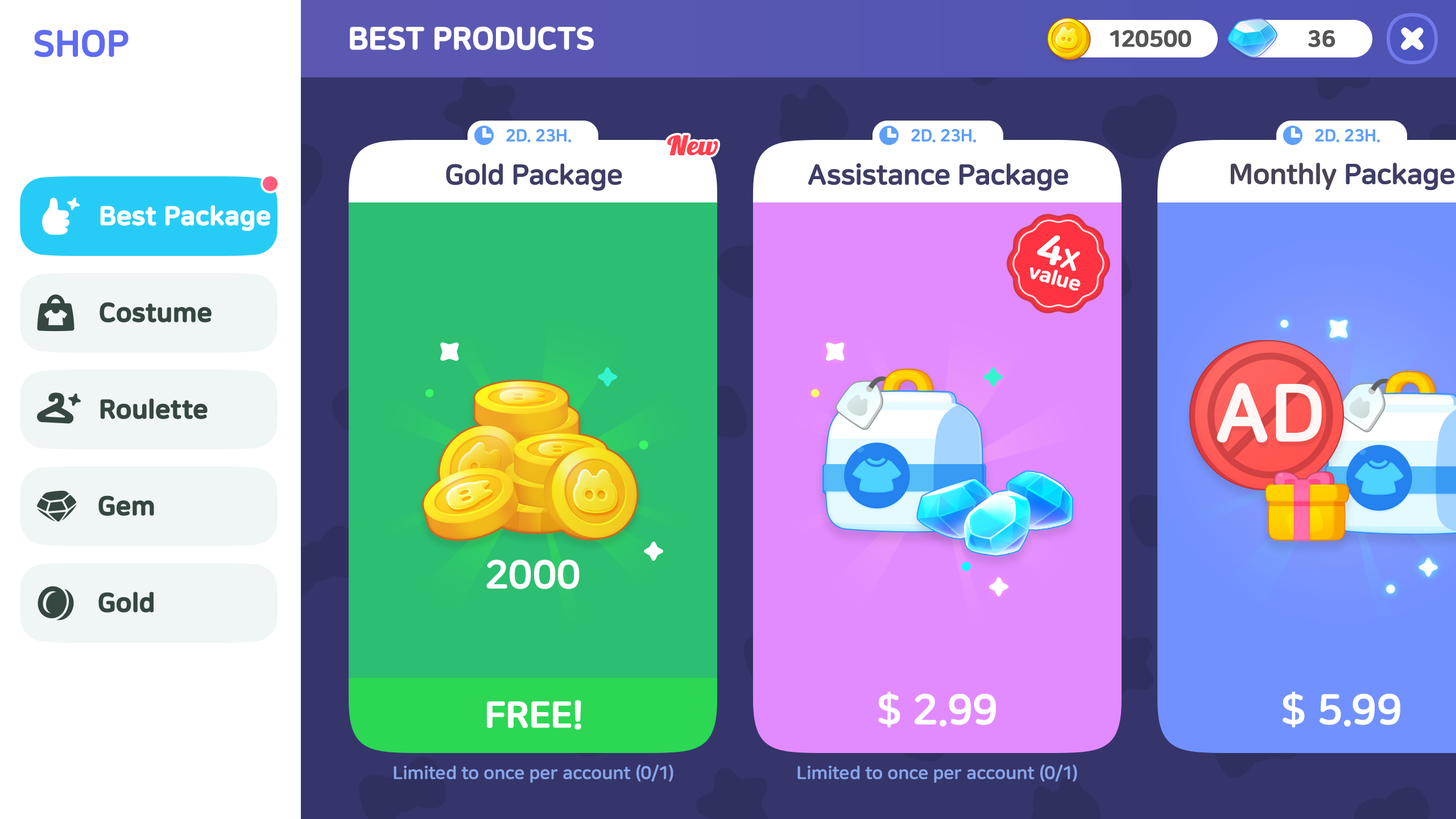
<style>
.page{position:relative;width:1456px;height:819px}
.page>*{position:absolute;margin:0}
.t1{font:36.4px "NanumSquareRoundOTFEB";letter-spacing:-0.01em;color:#5f6bf3;font-weight:bold}
.t2{font:30.7px "NanumSquareRoundOTFEB";letter-spacing:-0.01em;color:#ffffff;text-transform:uppercase;font-weight:bold}
.t3{font:22.7px "NanumSquareRoundOTFEB";letter-spacing:-0.01em;color:#555555;font-weight:bold}
.t4{font:17.1px "NanumSquareRoundOTFEB";letter-spacing:-0.01em;color:#5e9ff9}
.t5{font:25.6px "Lobster1.3";letter-spacing:-0.01em;color:#ff404e;font-weight:bold;scale:1.11 1}
.t6{font:28.4px "NanumSquareRoundEB";letter-spacing:-0.01em;color:#3d3d66}
.t7{font:28.4px "NanumSquareRoundOTFEB";letter-spacing:-0.01em;color:#3d3d66}
.t8{font:28.4px "NanumSquareRoundOTFEB";letter-spacing:-0.01em;color:#4a4354}
.t9{font:26.2px "NanumSquareRoundOTFEB";letter-spacing:-0.01em;color:#ffffff;font-weight:bold}
.t10{font:40.9px "NanumSquareRoundOTFEB";letter-spacing:-0.01em;color:#ffffff;text-transform:uppercase;font-weight:bold}
.t11{font:27.3px "NanumSquareRoundOTFEB";letter-spacing:-0.01em;color:#ffffff;text-transform:uppercase;font-weight:bold}
.t12{font:20.5px "NanumSquareRoundOTFEB";letter-spacing:-0.01em;color:#fdf8f9;font-weight:bold}
.t13{font:26.2px "NanumSquareRoundOTFEB";letter-spacing:-0.01em;color:#364741;font-weight:bold}
.t14{font:81.1px "NanumSquareRoundOTFEB";letter-spacing:-0.01em;color:#fff7f5;text-transform:uppercase;font-weight:bold}
.t15{font:39.8px "NanumSquareRoundEB";color:#ffffff}
.t16{font:36.4px "NanumSquareRoundOTFEB";letter-spacing:-0.01em;color:#ffffff;text-transform:uppercase;font-weight:bold}
.t17{font:42.6px "NanumSquareRoundOTFEB";letter-spacing:-0.01em;color:#ffffff;text-transform:uppercase}
.t18{font:18.2px "NanumSquareRoundOTFEB";letter-spacing:-0.01em;color:#87a4e8}
</style>
<div class="page">
<p class="t1" style="left:34px;top:30px;width:95px;height:27px">SHOP</p>
<p class="t2" style="left:350px;top:26px;width:244px;height:24px">Best Products</p>
<p class="t3" style="left:1110px;top:30px;width:82px;height:17px">120500</p>
<p class="t3" style="left:1308px;top:30px;width:27px;height:17px">36</p>
<p class="t4" style="left:506px;top:129px;width:65px;height:14px">2D. 23H.</p>
<p class="t5" style="left:667px;top:135px;width:51px;height:20px">New</p>
<p class="t4" style="left:911px;top:129px;width:65px;height:14px">2D. 23H.</p>
<p class="t4" style="left:1315px;top:129px;width:65px;height:14px">2D. 23H.</p>
<p class="t6" style="left:446px;top:163px;width:176px;height:28px">Gold Package</p>
<p class="t7" style="left:808px;top:163px;width:261px;height:28px">Assistance Package</p>
<p class="t8" style="left:1231px;top:163px;width:224px;height:28px">Monthly <span class="t7">Package</span></p>
<p class="t9" style="left:100px;top:205px;width:171px;height:26px">Best Package</p>
<p class="t10" style="left:1037px;top:235px;width:43px;height:36px;rotate:15deg">4<span class="t11">x</span></p>
<p class="t12" style="left:1030px;top:267px;width:51px;height:24px;rotate:15deg">value</p>
<p class="t13" style="left:100px;top:302px;width:112px;height:20px">Costume</p>
<p class="t14" style="left:1217px;top:383px;width:105px;height:59px">AD</p>
<p class="t13" style="left:100px;top:398px;width:108px;height:21px">Roulette</p>
<p class="t13" style="left:98px;top:495px;width:56px;height:21px">Gem</p>
<p class="t15" style="left:486px;top:560px;width:94px;height:29px">2000</p>
<p class="t13" style="left:98px;top:591px;width:56px;height:22px">Gold</p>
<p class="t16" style="left:487px;top:700px;width:94px;height:30px">Free!</p>
<p class="t17" style="left:878px;top:691px;width:118px;height:37px">$ 2.99</p>
<p class="t17" style="left:1283px;top:691px;width:117px;height:37px">$ 5.99</p>
<p class="t18" style="left:394px;top:764px;width:279px;height:19px">Limited to once per account (0/1)</p>
<p class="t18" style="left:797px;top:764px;width:280px;height:19px">Limited to once per account (0/1)</p>
</div>
